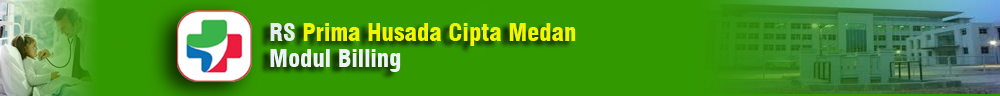
<style>
.page{position:relative;width:1000px;height:96px;background:#339900}
.page>*{position:absolute;margin:0}
.t1{font:24px "Swiss721BT-BlackCondensed";color:#f3f603}
.t2{font:24px "Swiss721BT-BlackCondensed";color:#e6ecf0}
.t3{font:24px "Swiss721BT-BlackCondensed";color:#ecf2f6}
</style>
<div class="page">
<p class="t1" style="left:270px;top:23px;width:306px;height:23px"><span class="t2">RS</span> Prima Husada Cipta Medan</p>
<p class="t3" style="left:270px;top:49px;width:131px;height:23px">Modul Billing</p>
</div>
